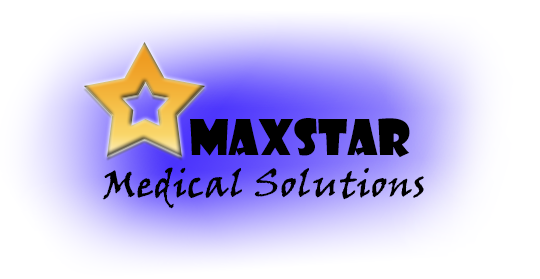
<style>
.page{position:relative;width:540px;height:279px}
.page>*{position:absolute;margin:0}
.t1{font:48px "ShowcardGothic-Reg";color:#000000}
.t2{font:37px "VinerHandITC";color:#000000;font-weight:bold}
</style>
<div class="page">
<p class="t1" style="left:190px;top:118px;width:220px;height:40px">MAXSTAR</p>
<p class="t2" style="left:102px;top:167px;width:322px;height:42px">Medical Solutions</p>
</div>
